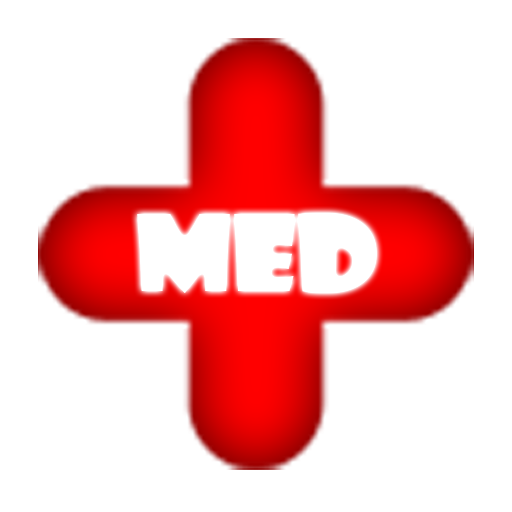
<style>
.page{position:relative;width:512px;height:512px;background:#ffffff}
.page>*{position:absolute;margin:0}
.t1{font:102px "ShowcardGothic-Reg";color:#ffffff;scale:1.14 1}
</style>
<div class="page">
<p class="t1" style="left:137px;top:213px;width:240px;height:80px">MED</p>
</div>
